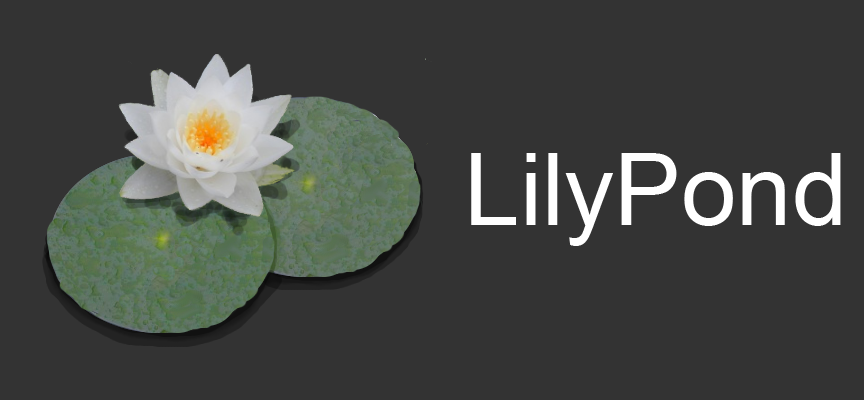
<style>
.page{position:relative;width:864px;height:400px;background:#333333}
.page>*{position:absolute;margin:0}
.t1{font:100px "ArialMT";color:#ffffff}
</style>
<div class="page">
<p class="t1" style="left:471px;top:153px;width:370px;height:93px">LilyPond</p>
</div>
